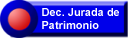
<style>
.page{position:relative;width:130px;height:38px;background:#0000ea}
.page>*{position:absolute;margin:0}
.t1{font:11px "Arial-BoldMT";color:#ffffff}
</style>
<div class="page">
<p class="t1" style="left:42px;top:8px;width:77px;height:21px">Dec. Jurada de Patrimonio</p>
</div>
